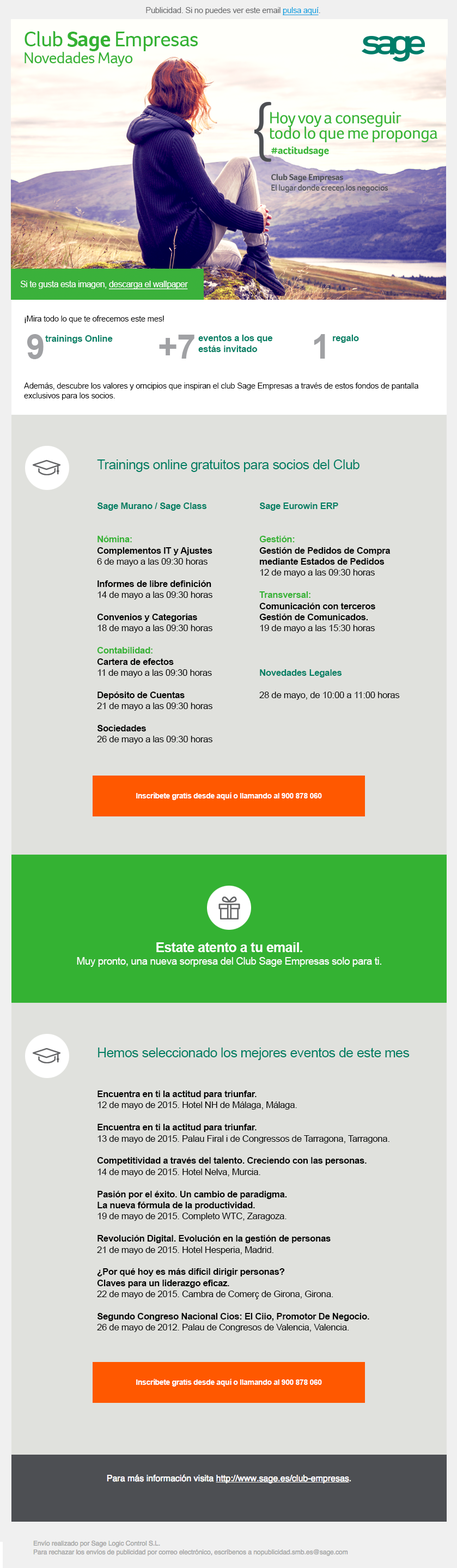
<style>
.page{position:relative;width:457px;height:1568px;background:#e0e1dd}
.page>*{position:absolute;margin:0}
.t1{font:8.2px "ArialMT";letter-spacing:-0.025em;color:#636466}
.t2{font:8.2px "ArialMT";letter-spacing:-0.025em;color:#009ee0;text-decoration:underline}
.t3{font:16.1px/16.5px "Foco-Regular";letter-spacing:-0.025em;color:#34b233}
.t4{font:21.8px/16.5px "Foco-Regular";letter-spacing:-0.025em;color:#34b233}
.t5{font:21.8px/16.5px "Foco-Bold";letter-spacing:-0.025em;color:#34b233}
.t6{font:8.5px "ArialMT";letter-spacing:-0.025em;color:#ffffff}
.t7{font:8.5px "ArialMT";letter-spacing:-0.025em;color:#ffffff;text-decoration:underline}
.t8{font:8.2px "ArialMT";letter-spacing:-0.025em;color:#000000}
.t9{font:33.6px "Arial-BoldMT";letter-spacing:-0.025em;color:#a0a1a4}
.t10{font:9.3px "Arial-BoldMT";letter-spacing:-0.025em;color:#007f64}
.t11{font:13.6px "ArialMT";letter-spacing:-0.025em;color:#007f64}
.t12{font:9.3px "Arial-BoldMT";letter-spacing:-0.025em;color:#000000}
.t13{font:9.3px "Arial-BoldMT";letter-spacing:-0.025em;color:#34b233}
.t14{font:9.3px "ArialMT";letter-spacing:-0.025em;color:#000000}
.t15{font:7.6px "Arial-BoldMT";letter-spacing:-0.025em;color:#ffffff}
.t16{font:10.4px "ArialMT";letter-spacing:-0.025em;color:#ffffff}
.t17{font:13.6px "Arial-BoldMT";letter-spacing:-0.025em;color:#ffffff}
</style>
<div class="page">
<p class="t1" style="left:146px;top:7px;width:174px;height:8px">Publicidad. Si no puedes ver este email <span class="t2">pulsa aquí</span>.</p>
<p class="t3" style="left:25px;top:31px;width:173px;height:35px"><span class="t4">Club </span><span class="t5">Sage</span><span class="t4"> Empresas<br></span>Novedades Mayo</p>
<p class="t6" style="left:21px;top:281px;width:167px;height:8px">Si te gusta esta imagen, <span class="t7">descarga el wallpaper</span></p>
<p class="t8" style="left:25px;top:316px;width:139px;height:7px">¡Mira todo lo que te ofrecemos este mes!</p>
<p class="t9" style="left:27px;top:334px;width:17px;height:25px">9</p>
<p class="t10" style="left:45px;top:335px;width:68px;height:8px">trainings Online</p>
<p class="t9" style="left:159px;top:335px;width:36px;height:24px">+7</p>
<p class="t10" style="left:198px;top:335px;width:75px;height:17px">eventos a los que<br>estás invitado</p>
<p class="t9" style="left:314px;top:334px;width:11px;height:25px">1</p>
<p class="t10" style="left:333px;top:335px;width:26px;height:8px">regalo</p>
<p class="t8" style="left:24px;top:383px;width:395px;height:17px">Además, descubre los valores y orncipios que inspiran el club Sage Empresas a través de estos fondos de pantalla<br>exclusivos para los socios.</p>
<p class="t11" style="left:97px;top:459px;width:263px;height:13px">Trainings online gratuitos para socios del Club</p>
<p class="t12" style="left:97px;top:503px;width:116px;height:241px"><span class="t10">Sage Murano / Sage Class<br><br></span><span class="t13"><br>Nómina:<br></span>Complementos IT y Ajustes<br><span class="t14">6 de mayo a las 09:30 horas<br><br></span>Informes de libre definición<br><span class="t14">14 de mayo a las 09:30 horas<br><br></span>Convenios y Categorías<br><span class="t14">18 de mayo a las 09:30 horas<br><br></span><span class="t13">Contabilidad:<br></span>Cartera de efectos<br><span class="t14">11 de mayo a las 09:30 horas<br><br></span>Depósito de Cuentas<br><span class="t14">21 de mayo a las 09:30 horas<br><br></span>Sociedades<br><span class="t14">26 de mayo a las 09:30 horas</span></p>
<p class="t12" style="left:259px;top:503px;width:141px;height:197px"><span class="t10">Sage Eurowin ERP<br><br></span><span class="t13"><br>Gestión:<br></span>Gestión de Pedidos de Compra<br>mediante Estados de Pedidos<br><span class="t14">12 de mayo a las 09:30 horas <br></span><span class="t13"><br>Transversal:<br></span>Comunicación con terceros<br>Gestión de Comunicados. <br><span class="t14">19 de mayo a las 15:30 horas<br><br><br><br></span><span class="t10">Novedades Legales<br><br></span><span class="t14">28 de mayo, de 10:00 a 11:00 horas</span></p>
<p class="t15" style="left:136px;top:792px;width:186px;height:8px">Inscríbete gratis desde aquí o llamando al 900 878 060</p>
<p class="t16" style="left:77px;top:942px;width:305px;height:25px;text-align:center"><span class="t17">Estate atento a tu email.<br></span>Muy pronto, una nueva sorpresa del Club Sage Empresas solo para ti.</p>
<p class="t11" style="left:98px;top:1048px;width:312px;height:12px">Hemos seleccionado los mejores eventos de este mes</p>
<p class="t12" style="left:97px;top:1091px;width:293px;height:241px">Encuentra en ti la actitud para triunfar. <br><span class="t14">12 de mayo de 2015. Hotel NH de Málaga, Málaga.<br><br></span>Encuentra en ti la actitud para triunfar. <br><span class="t14">13 de mayo de 2015. Palau Firal i de Congressos de Tarragona, Tarragona.<br></span><br>Competitividad a través del talento. Creciendo con las personas.<br><span class="t14">14 de mayo de 2015. Hotel Nelva, Murcia. <br></span><br>Pasión por el éxito. Un cambio de paradigma.<br>La nueva fórmula de la productividad.<br><span class="t14">19 de mayo de 2015. Completo WTC, Zaragoza.<br></span><br>Revolución Digital. Evolución en la gestión de personas<br><span class="t14">21 de mayo de 2015. Hotel Hesperia, Madrid. <br></span><br>¿Por qué hoy es más difícil dirigir personas?<br>Claves para un liderazgo eficaz.<br><span class="t14">22 de mayo de 2015. Cambra de Comerç de Girona, Girona.<br></span><br>Segundo Congreso Nacional Cios: El Ciio, Promotor De Negocio.<br><span class="t14">26 de mayo de 2012. Palau de Congresos de Valencia, Valencia.</span></p>
<p class="t15" style="left:136px;top:1379px;width:186px;height:8px">Inscríbete gratis desde aquí o llamando al 900 878 060</p>
</div>
